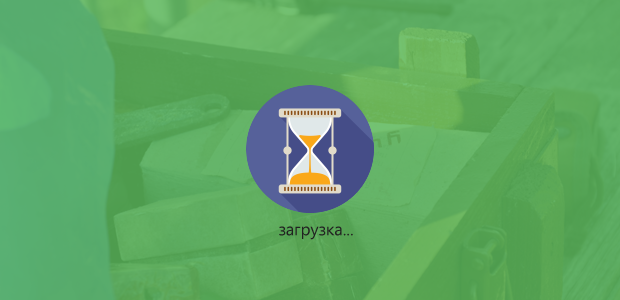
<style>
.page{position:relative;width:620px;height:300px}
.page>*{position:absolute;margin:0}
.t1{font:16.7px "SegoeUI";color:#212121}
</style>
<div class="page">
<p class="t1" style="left:279px;top:226px;width:74px;height:14px">загрузка...</p>
</div>
